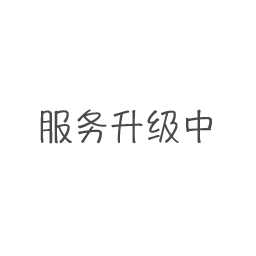
<style>
.page{position:relative;width:256px;height:256px;background:#ffffff}
.page>*{position:absolute;margin:0}
.t1{font:36px "HannotateSC-W5";color:#4a4a4b}
</style>
<div class="page">
<p class="t1" style="left:40px;top:109px;width:172px;height:35px">服务升级中</p>
</div>
